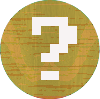
<style>
.page{position:relative;width:100px;height:99px;background:#ffffff}
.page>*{position:absolute;margin:0}
.t1{font:72px "pixelmix-bold";color:#f7f3f3}
</style>
<div class="page">
<p class="t1" style="left:32px;top:17px;width:45px;height:63px">?</p>
</div>
